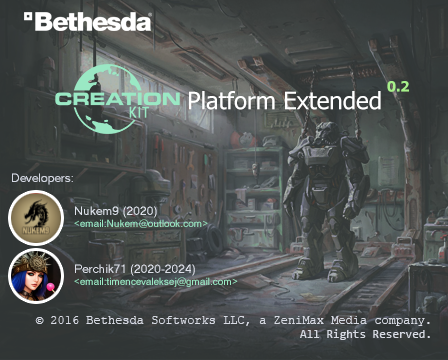
<style>
.page{position:relative;width:448px;height:360px}
.page>*{position:absolute;margin:0}
.t1{font:14px "Tahoma-Bold";color:#a8f08b}
.t2{font:24px "Tahoma";color:#ffffff}
.t3{font:12px "MS Sans Serif";color:#d3d7e2}
.t4{font:10px "MS Sans Serif";color:#99e7c3}
.t5{font:12px "MS Sans Serif";color:#dee2eb}
.t6{font:10px "MS Sans Serif";color:#9ae8c4}
.t7{font:12px "MS Sans Serif";color:#dcdfe8}
.t8{font:12px "CourierNewPSMT";color:#d8dbe4}
.t9{font:12px "Consolas";color:#d8dbe4}
</style>
<div class="page">
<p class="t1" style="left:387px;top:81px;width:22px;height:11px">0.2</p>
<p class="t2" style="left:189px;top:91px;width:192px;height:19px">Platform Extended</p>
<p class="t3" style="left:12px;top:173px;width:61px;height:12px">Developers:</p>
<p class="t4" style="left:74px;top:206px;width:134px;height:22px;text-align:right"><span class="t5">Nukem9 (2020)<br></span>&lt;email:Nukem@outlook.com&gt;</p>
<p class="t6" style="left:74px;top:264px;width:164px;height:23px;text-align:right"><span class="t7">Perchik71 (2020-2024)<br></span>&lt;email:timencevaleksej@gmail.com&gt;</p>
<p class="t8" style="left:35px;top:316px;width:395px;height:24px">© 2016 Bethesda Softworks LLC, a ZeniMax Media company.<span class="t9"><br>All Rights Reserved.</span></p>
</div>
